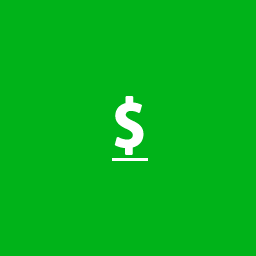
<style>
.page{position:relative;width:256px;height:256px;background:#00b319}
.page>*{position:absolute;margin:0}
.t1{font:60px "AdobeGothicStd-Bold";color:#ffffff;font-variant:small-caps;font-weight:bold;text-decoration:underline}
</style>
<div class="page">
<p class="t1" style="left:112px;top:96px;width:36px;height:65px">$</p>
</div>
